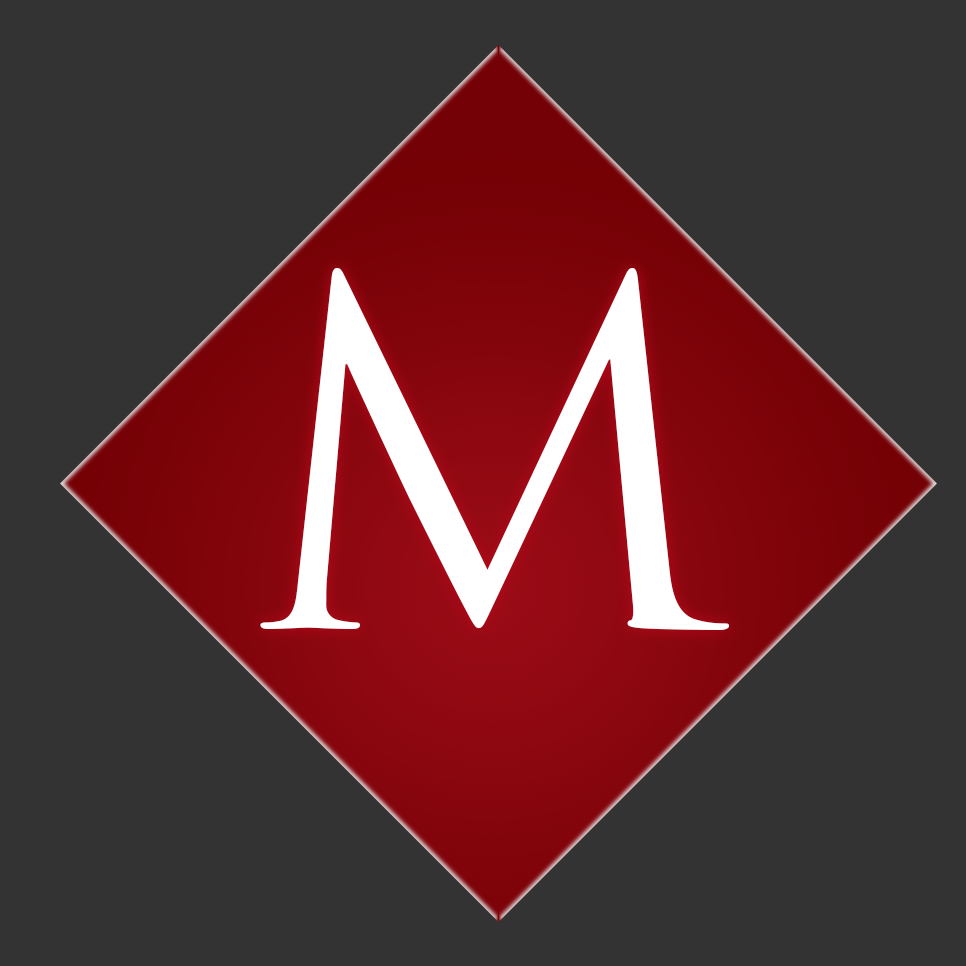
<style>
.page{position:relative;width:966px;height:966px;background:#333333}
.page>*{position:absolute;margin:0}
.t1{font:469px "TrajanPro-Regular";color:#ffffff}
</style>
<div class="page">
<p class="t1" style="left:260px;top:268px;width:469px;height:362px">M</p>
</div>
